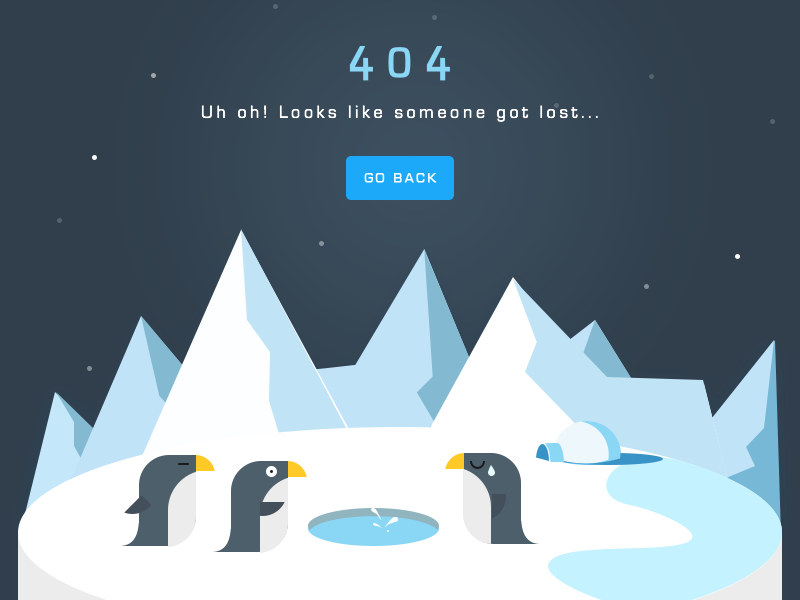
<style>
.page{position:relative;width:800px;height:600px}
.page>*{position:absolute;margin:0}
.t1{font:18px "EurostileRegular";letter-spacing:0.2em;color:#ffffff}
.t2{font:14px "EurostileRegular";letter-spacing:0.2em;color:#ffffff;font-weight:bold}
</style>
<div class="page">
<p class="t1" style="left:201px;top:105px;width:397px;height:17px">Uh oh! Looks like someone got lost...</p>
<p class="t2" style="left:364px;top:173px;width:73px;height:10px">GO BACK</p>
</div>
